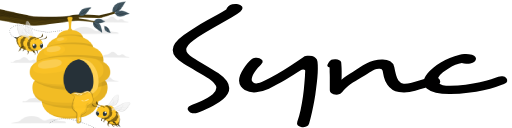
<style>
.page{position:relative;width:512px;height:128px;background:#ffffff}
.page>*{position:absolute;margin:0}
.t1{font:113px "Desyrel";color:#000000;scale:1.4 1}
.t2{font:113px "Desyrel";color:#000000;scale:1.48 1}
</style>
<div class="page">
<p class="t1" style="left:172px;top:3px;width:336px;height:125px"><span class="t2">S</span>ync</p>
</div>
